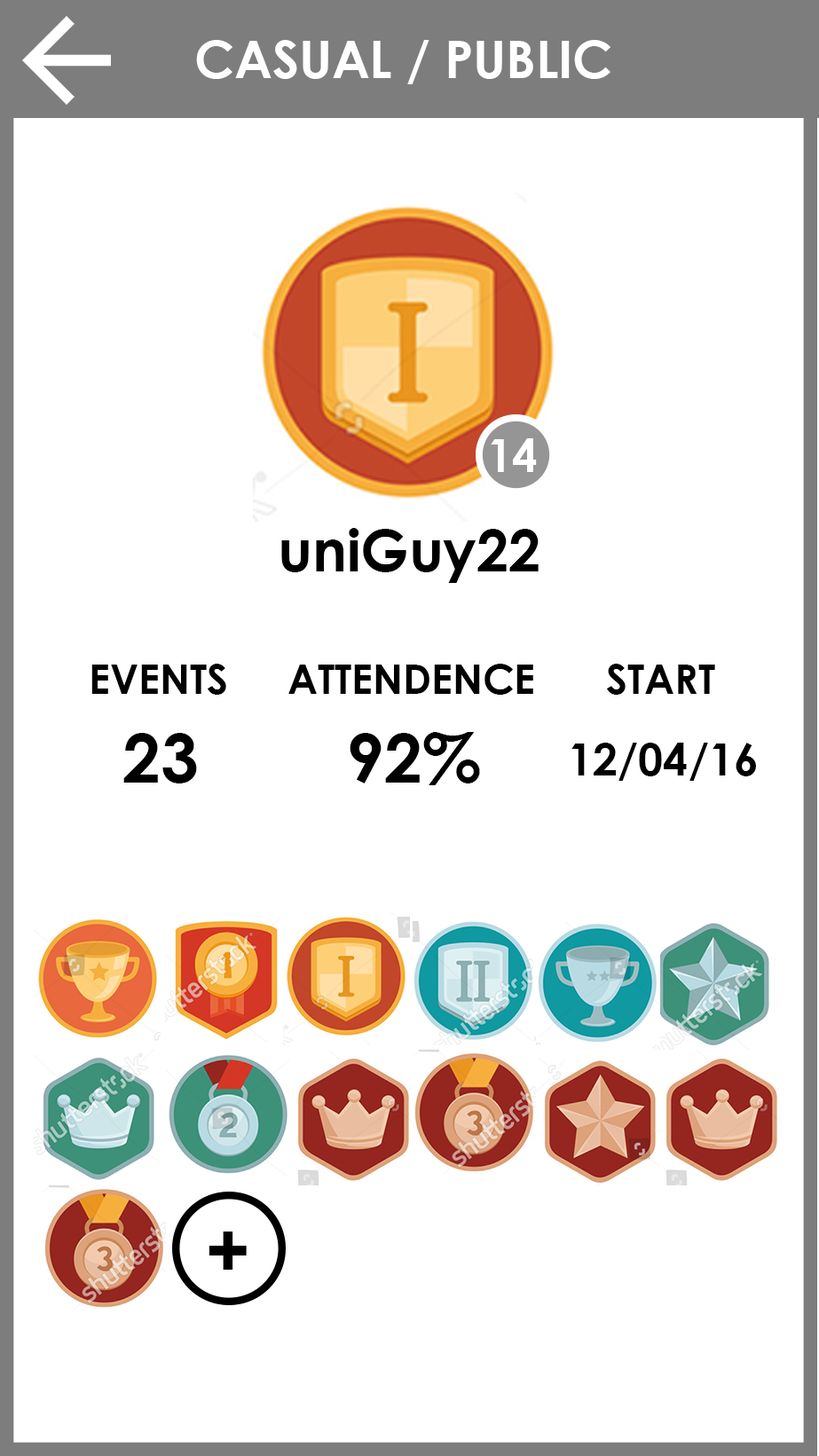
<style>
.page{position:relative;width:819px;height:1456px;background:#ffffff}
.page>*{position:absolute;margin:0}
.t1{font:51.3px "CenturyGothic-Bold";color:#ffffff}
.t2{font:45.1px "CenturyGothic-Bold";color:#ffffff}
.t3{font:57.5px "CenturyGothic-Bold";color:#000000}
.t4{font:40.6px "CenturyGothic-Bold";color:#000000}
.t5{font:68.1px "CenturyGothic-Bold";color:#000000}
.t6{font:44.5px "CenturyGothic-Bold";color:#000000}
.t7{font:76.1px "CenturyGothic-Bold";color:#000000}
</style>
<div class="page">
<p class="t1" style="left:196px;top:40px;width:414px;height:44px">CASUAL / PUBLIC</p>
<p class="t2" style="left:491px;top:438px;width:46px;height:34px">14</p>
<p class="t3" style="left:281px;top:528px;width:258px;height:55px">uniGuy22</p>
<p class="t4" style="left:91px;top:664px;width:135px;height:31px">EVENTS</p>
<p class="t4" style="left:288px;top:664px;width:245px;height:31px">ATTENDENCE</p>
<p class="t4" style="left:607px;top:664px;width:108px;height:31px">START</p>
<p class="t5" style="left:123px;top:733px;width:74px;height:50px">23</p>
<p class="t5" style="left:350px;top:732px;width:130px;height:53px">92%</p>
<p class="t6" style="left:571px;top:743px;width:185px;height:38px">12/04/16</p>
<p class="t7" style="left:209px;top:1232px;width:38px;height:38px">+</p>
</div>
